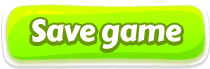
<style>
.page{position:relative;width:210px;height:69px}
.page>*{position:absolute;margin:0}
.t1{font:30px "CarterOne";letter-spacing:-0.02em;color:#ffffff}
</style>
<div class="page">
<p class="t1" style="left:32px;top:19px;width:150px;height:30px">Save game</p>
</div>
